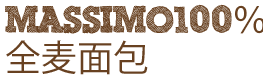
<style>
.page{position:relative;width:263px;height:75px;background:#ffffff}
.page>*{position:absolute;margin:0}
.t1{font:36px/38px "ScribbleBoxDEMO";color:#684121}
.t2{font:36px/38px "KozGoPr6N-Regular";color:#684121}
</style>
<div class="page">
<p class="t1" style="left:5px;top:4px;width:260px;height:71px">Massimo100<span class="t2">％<br>全麦面包</span></p>
</div>
